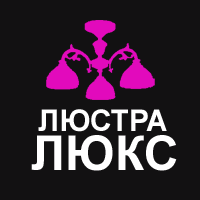
<style>
.page{position:relative;width:200px;height:200px;background:#121112}
.page>*{position:absolute;margin:0}
.t1{font:30px "Arial-BoldMT";color:#ffffff}
.t2{font:48px "Arial-BoldMT";color:#ffffff}
</style>
<div class="page">
<p class="t1" style="left:38px;top:109px;width:129px;height:23px">ЛЮСТРА</p>
<p class="t2" style="left:31px;top:135px;width:146px;height:36px">ЛЮКС</p>
</div>
